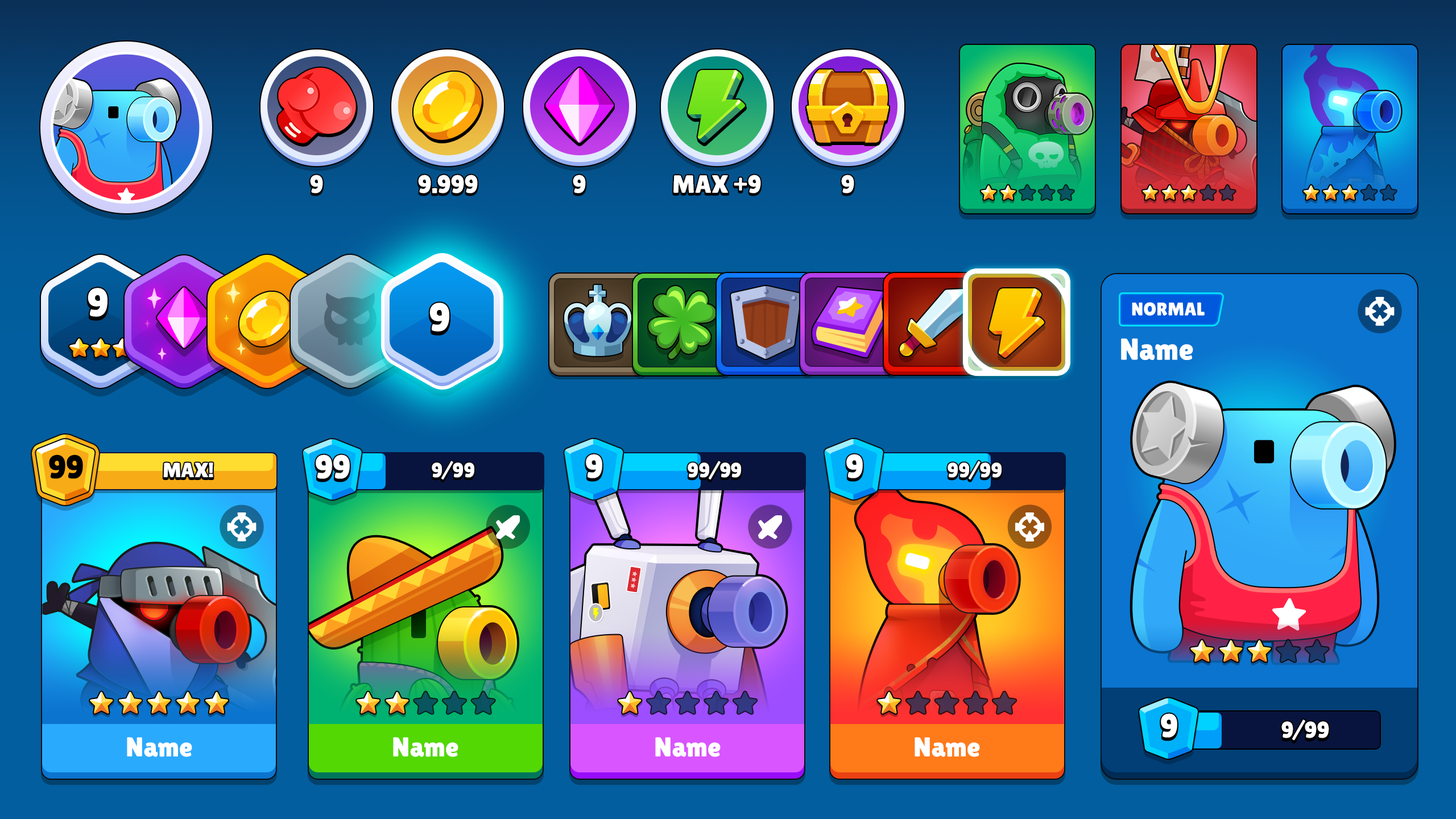
<style>
.page{position:relative;width:1456px;height:819px}
.page>*{position:absolute;margin:0}
.t1{font:25px "LilitaOne";color:#ffffff;text-transform:uppercase}
.t2{font:39.8px "LilitaOne";color:#ffffff}
.t3{font:18.4px "LilitaOne";color:#ffffff;text-transform:uppercase}
.t4{font:30.3px "LilitaOne";color:#ffffff}
.t5{font:33px "LilitaOne";color:#000000;text-transform:uppercase}
.t6{font:33px "LilitaOne";color:#ffffff;text-transform:uppercase}
.t7{font:20.5px "LilitaOne";color:#ffffff;text-transform:uppercase}
.t8{font:22.7px "LilitaOne";color:#ffffff;text-transform:uppercase}
.t9{font:27.3px "LilitaOne";color:#ffffff}
</style>
<div class="page">
<p class="t1" style="left:310px;top:175px;width:13px;height:18px">9</p>
<p class="t1" style="left:418px;top:175px;width:60px;height:18px">9.999</p>
<p class="t1" style="left:573px;top:175px;width:13px;height:18px">9</p>
<p class="t1" style="left:673px;top:175px;width:88px;height:18px">max +9</p>
<p class="t1" style="left:841px;top:175px;width:13px;height:18px">9</p>
<p class="t2" style="left:88px;top:288px;width:19px;height:29px">9</p>
<p class="t2" style="left:429px;top:303px;width:20px;height:29px">9</p>
<p class="t3" style="left:1132px;top:302px;width:73px;height:14px">Normal</p>
<p class="t4" style="left:1121px;top:338px;width:72px;height:22px">Name</p>
<p class="t5" style="left:49px;top:454px;width:34px;height:25px">99</p>
<p class="t6" style="left:316px;top:454px;width:34px;height:25px">99</p>
<p class="t7" style="left:432px;top:461px;width:42px;height:18px">9/99</p>
<p class="t6" style="left:586px;top:454px;width:16px;height:24px">9</p>
<p class="t7" style="left:688px;top:461px;width:53px;height:18px">99/99</p>
<p class="t6" style="left:846px;top:454px;width:17px;height:24px">9</p>
<p class="t7" style="left:948px;top:461px;width:54px;height:18px">99/99</p>
<p class="t7" style="left:163px;top:462px;width:50px;height:15px">MAX!</p>
<p class="t6" style="left:1161px;top:713px;width:16px;height:25px">9</p>
<p class="t8" style="left:1281px;top:719px;width:48px;height:22px">9/99</p>
<p class="t9" style="left:127px;top:737px;width:65px;height:20px">Name</p>
<p class="t9" style="left:393px;top:737px;width:65px;height:20px">Name</p>
<p class="t9" style="left:655px;top:737px;width:66px;height:20px">Name</p>
<p class="t9" style="left:915px;top:737px;width:65px;height:20px">Name</p>
</div>
